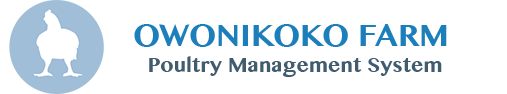
<style>
.page{position:relative;width:507px;height:94px;background:#ffffff}
.page>*{position:absolute;margin:0}
.t1{font:36px "KhmerMN-Bold";color:#1d7ebc}
.t2{font:24px "KhmerMN-Bold";color:#415c6e}
</style>
<div class="page">
<p class="t1" style="left:134px;top:24px;width:313px;height:23px">OWONIKOKO FARM</p>
<p class="t2" style="left:149px;top:56px;width:293px;height:21px">Poultry Management System</p>
</div>
